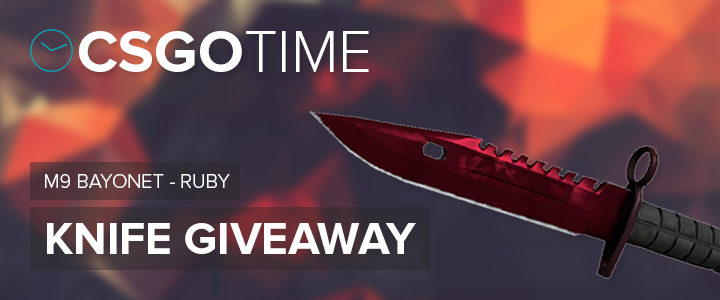
<style>
.page{position:relative;width:720px;height:300px}
.page>*{position:absolute;margin:0}
.t1{font:60px "ProximaNova-Bold";color:#ffffff}
.t2{font:60px "ProximaNova-Light";color:#ffffff}
.t3{font:20px "ProximaNova-Light";color:#ffffff}
.t4{font:46px "ProximaNova-Bold";color:#ffffff}
</style>
<div class="page">
<p class="t1" style="left:79px;top:31px;width:290px;height:41px">CSGO<span class="t2">TIME</span></p>
<p class="t3" style="left:45px;top:174px;width:185px;height:14px">M9 BAYONET - RUBY</p>
<p class="t4" style="left:47px;top:223px;width:369px;height:31px">KNIFE GIVEAWAY</p>
</div>
